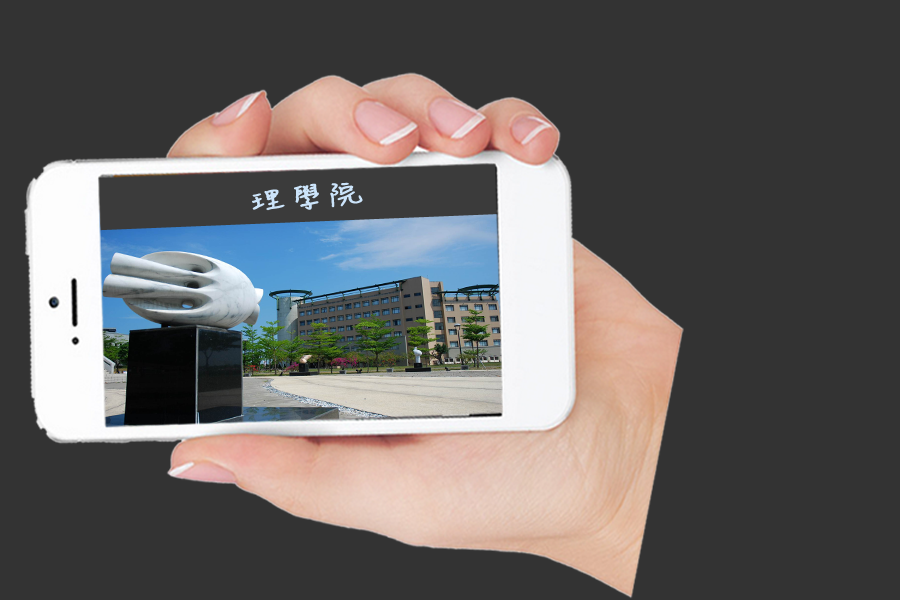
<style>
.page{position:relative;width:900px;height:600px;background:#333333}
.page>*{position:absolute;margin:0}
.t1{font:28.1px "DFHsiu-W3-WINP-BF";color:#cce4fa;font-weight:bold;scale:1.36 1}
</style>
<div class="page">
<p class="t1" style="left:252px;top:182px;width:111px;height:29px;rotate:-4deg">理學院</p>
</div>
